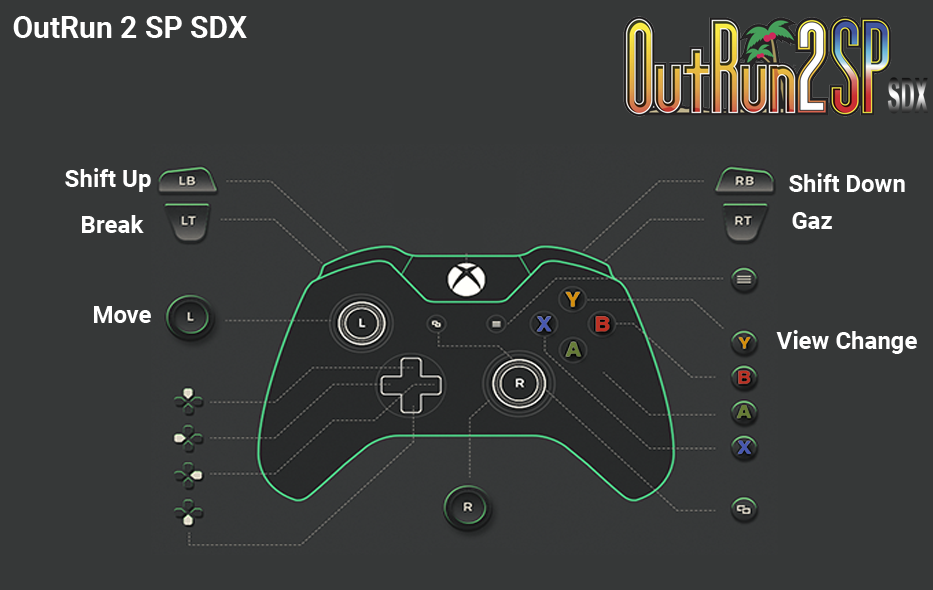
<style>
.page{position:relative;width:933px;height:590px;background:#363838}
.page>*{position:absolute;margin:0}
.t1{font:30px "Roboto-Bold";color:#ffffff}
.t2{font:24px "Roboto-Bold";color:#ffffff}
</style>
<div class="page">
<p class="t1" style="left:13px;top:16px;width:234px;height:22px">OutRun 2 SP SDX</p>
<p class="t2" style="left:65px;top:168px;width:86px;height:24px">Shift Up</p>
<p class="t2" style="left:789px;top:173px;width:116px;height:19px">Shift Down</p>
<p class="t2" style="left:82px;top:215px;width:62px;height:18px">Break</p>
<p class="t2" style="left:792px;top:212px;width:40px;height:17px">Gaz</p>
<p class="t2" style="left:94px;top:306px;width:57px;height:17px">Move</p>
<p class="t2" style="left:776px;top:330px;width:141px;height:24px">View Change</p>
</div>
